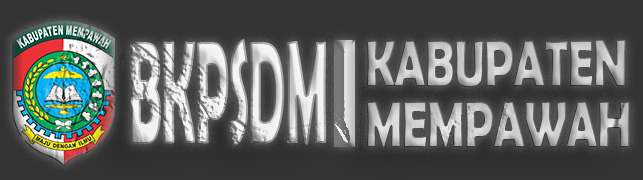
<style>
.page{position:relative;width:643px;height:180px;background:#333333}
.page>*{position:absolute;margin:0}
.t1{font:147.6px "BerlinSansFBDemi-Bold";letter-spacing:-0.025em;scale:0.36 1}
.t2{font:64.9px "BerlinSansFBDemi-Bold";letter-spacing:-0.025em;scale:0.72 1}
</style>
<div class="page">
<p class="t1" style="left:130px;top:39px;width:196px;height:108px">BKPSDM</p>
<p class="t2" style="left:367px;top:40px;width:259px;height:47px">KABUPATEN</p>
<p class="t2" style="left:367px;top:101px;width:263px;height:47px">MEMPAWAH</p>
</div>
